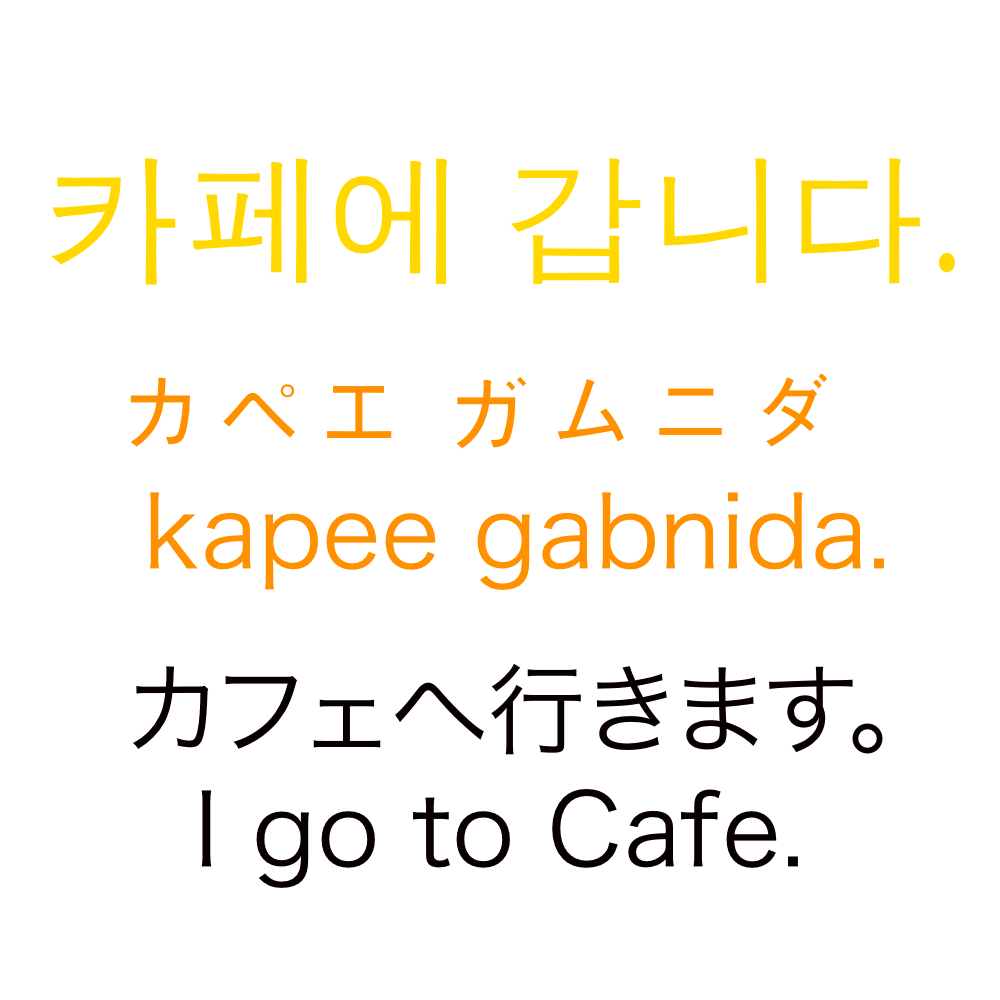
<style>
.page{position:relative;width:1000px;height:1000px;background:#ffffff}
.page>*{position:absolute;margin:0}
.t1{font:140px "AppleGothic";color:#ffd800}
.t2{font:100px "HiraKakuProN-W3";color:#ff9000}
.t3{font:100px "AppleGothic";color:#ff9000}
.t4{font:100px "HiraKakuProN-W3";color:#080000}
</style>
<div class="page">
<p class="t1" style="left:51px;top:158px;width:904px;height:127px">카페에 갑니다.</p>
<p class="t2" style="left:130px;top:373px;width:754px;height:217px"><span class="t3">カペエ ガムニダ<br></span> kapee gabnida.</p>
<p class="t4" style="left:133px;top:664px;width:750px;height:224px">カフェへ行きます。<br>  I go to Cafe.</p>
</div>
